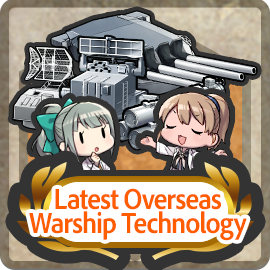
<style>
.page{position:relative;width:270px;height:270px}
.page>*{position:absolute;margin:0}
.t1{font:30px/24px "AdobeClean-Bold";letter-spacing:-0.04em;color:#ff5d00;scale:0.9 1}
</style>
<div class="page">
<p class="t1" style="left:29px;top:188px;width:218px;height:53px;text-align:center">Latest Overseas<br>Warship Technology</p>
</div>
